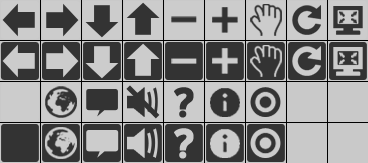
<style>
.page{position:relative;width:368px;height:163px;background:#cccccc}
.page>*{position:absolute;margin:0}
.t1{font:50px "BlueHighwayBold";color:#333333;font-weight:bold}
.t2{font:50px "BlueHighwayBold";color:#cccccc;font-weight:bold}
</style>
<div class="page">
<p class="t1" style="left:174px;top:87px;width:20px;height:31px">?</p>
<p class="t2" style="left:174px;top:128px;width:20px;height:31px">?</p>
</div>
